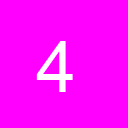
<style>
.page{position:relative;width:128px;height:128px;background:#ff00ff}
.page>*{position:absolute;margin:0}
.t1{font:72px "ArialMT";color:#ffffff}
</style>
<div class="page">
<p class="t1" style="left:36px;top:41px;width:37px;height:51px">4</p>
</div>
